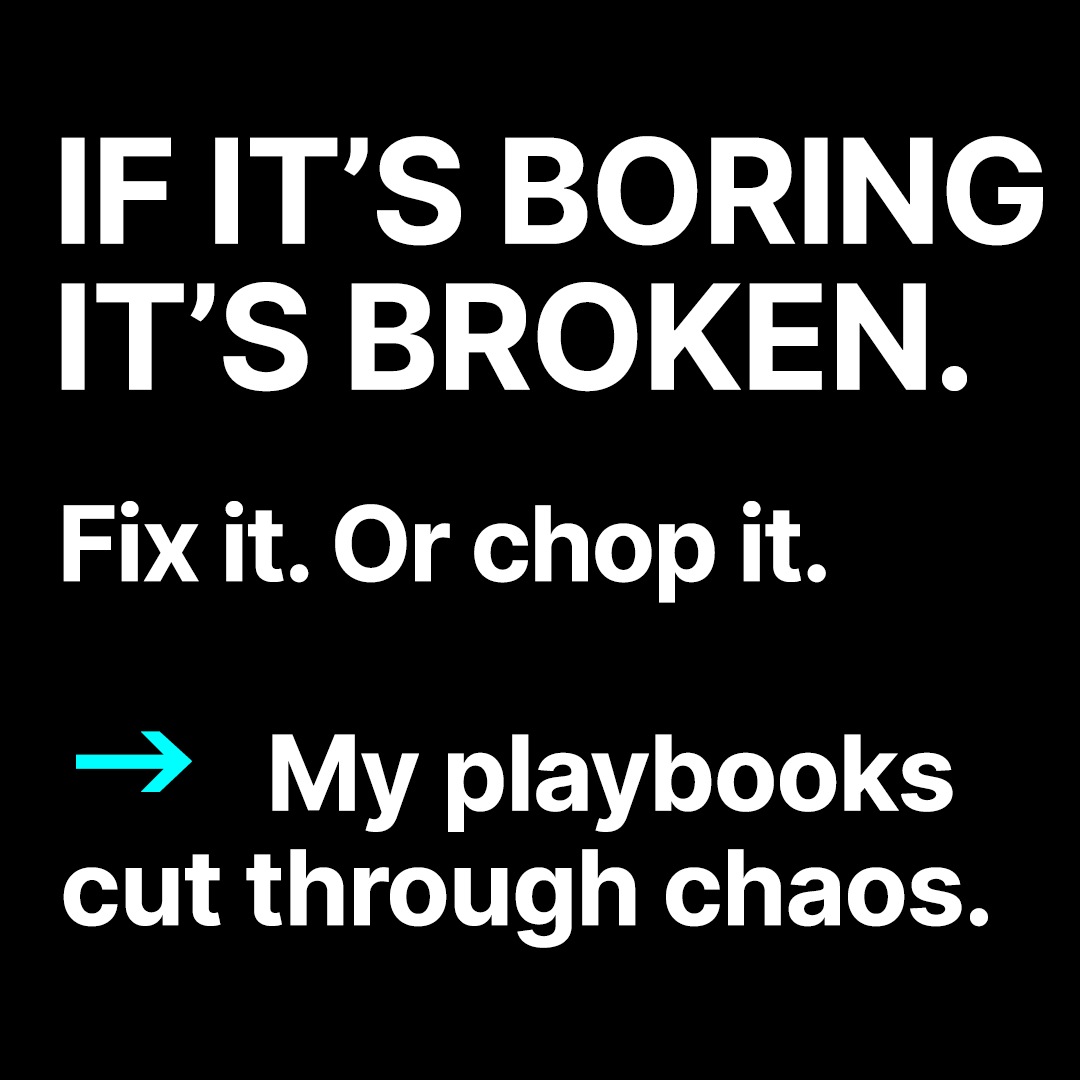
<style>
.page{position:relative;width:1080px;height:1080px;background:#000000}
.page>*{position:absolute;margin:0}
.t1{font:145.8px/145.8px "Inter-Bold";letter-spacing:-0.015em;color:#ffffff}
.t2{font:104.2px "Inter-Bold";letter-spacing:-0.025em;color:#ffffff}
.t3{font:104.2px/114.6px "Inter-Bold";letter-spacing:-0.015em;color:#ffffff}
.t4{font:166.7px/114.6px "SegoeUIEmoji";letter-spacing:-0.015em;color:#00ffff}
</style>
<div class="page">
<p class="t1" style="left:61px;top:136px;width:982px;height:256px">IF IT’S BORING<br>IT’S BROKEN.</p>
<p class="t2" style="left:63px;top:501px;width:763px;height:102px">Fix it. Or chop it.</p>
<p class="t3" style="left:63px;top:731px;width:925px;height:217px"><span class="t4">→  </span>My playbooks<br>cut through chaos.</p>
</div>
